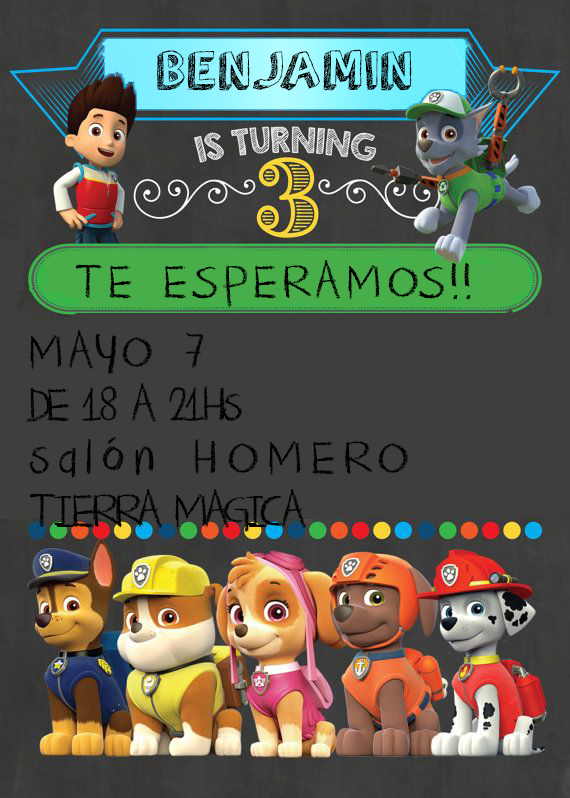
<style>
.page{position:relative;width:570px;height:798px;background:#3e3e3c}
.page>*{position:absolute;margin:0}
.t1{font:55px "orangejuice";letter-spacing:0.08em;color:#000000}
.t2{font:55px "DKCrayonCrumble";letter-spacing:0.08em;color:#000000}
.t3{font:55px/53px "DKCrayonCrumble";letter-spacing:-0.1em;color:#000000}
.t4{font:55px/0px "DKCrayonCrumble";letter-spacing:0.08em;color:#000000}
.t5{font:55px/53px "DKCrayonCrumble";letter-spacing:0.14em;color:#000000}
</style>
<div class="page">
<p class="t1" style="left:157px;top:49px;width:255px;height:42px">BENJAMIN</p>
<p class="t2" style="left:76px;top:260px;width:395px;height:48px">TE ESPERAMOS!!</p>
<p class="t3" style="left:26px;top:330px;width:382px;height:202px"><span class="t4">MAYO 7<br></span>DE 18 A 21Hs<br><span class="t5">salón HOMERO<br></span>TIERRA MAGICA</p>
</div>
